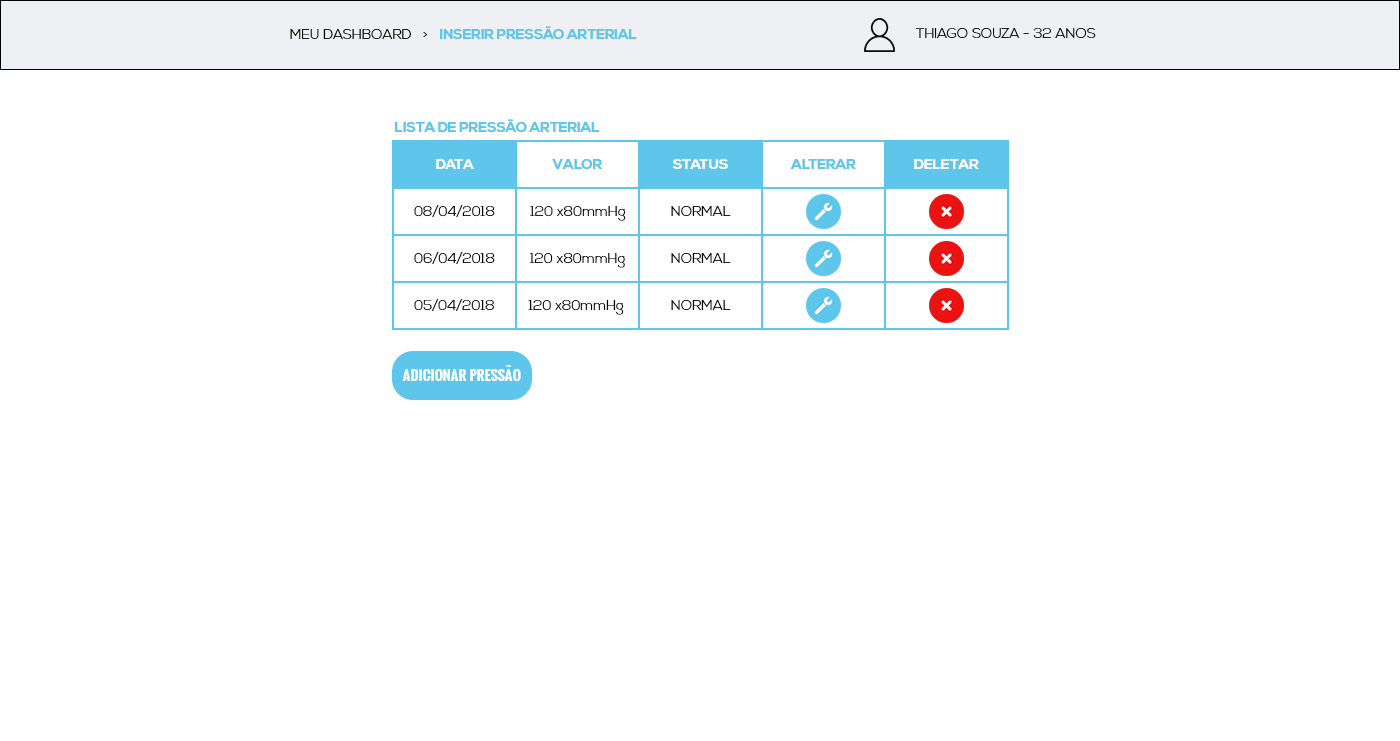
<style>
.page{position:relative;width:1400px;height:741px;background:#ffffff}
.page>*{position:absolute;margin:0}
.t1{font:14px "NexaBold";color:#5dc6ea}
.t2{font:14px "NexaLight";color:#000000}
.t3{font:14px "NexaBold";color:#ffffff}
.t4{font:14px "Oswald-Bold";color:#ffffff}
</style>
<div class="page">
<p class="t1" style="left:290px;top:26px;width:347px;height:13px"><span class="t2">MEU DASHBOARD   &gt;   </span>INSERIR PRESSÃO ARTERIAL</p>
<p class="t2" style="left:915px;top:28px;width:181px;height:10px">THIAGO SOUZA - 32 ANOS</p>
<p class="t1" style="left:395px;top:119px;width:204px;height:13px">LISTA DE PRESSÃO ARTERIAL</p>
<p class="t3" style="left:436px;top:159px;width:38px;height:10px">DATA</p>
<p class="t1" style="left:552px;top:159px;width:50px;height:10px">VALOR</p>
<p class="t3" style="left:672px;top:159px;width:56px;height:10px">STATUS</p>
<p class="t1" style="left:790px;top:159px;width:66px;height:10px">ALTERAR</p>
<p class="t3" style="left:914px;top:159px;width:65px;height:10px">DELETAR</p>
<p class="t2" style="left:414px;top:205px;width:81px;height:12px">08/04/2018</p>
<p class="t2" style="left:530px;top:206px;width:96px;height:15px">120 x80mmHg</p>
<p class="t2" style="left:671px;top:206px;width:60px;height:10px">NORMAL</p>
<p class="t2" style="left:414px;top:252px;width:81px;height:12px">06/04/2018</p>
<p class="t2" style="left:529px;top:253px;width:96px;height:15px">120 x80mmHg</p>
<p class="t2" style="left:671px;top:253px;width:60px;height:10px">NORMAL</p>
<p class="t2" style="left:414px;top:299px;width:80px;height:12px">05/04/2018</p>
<p class="t2" style="left:528px;top:300px;width:96px;height:15px">120 x80mmHg</p>
<p class="t2" style="left:671px;top:300px;width:60px;height:10px">NORMAL</p>
<p class="t4" style="left:402px;top:365px;width:119px;height:16px">ADICIONAR PRESSÃO</p>
</div>
